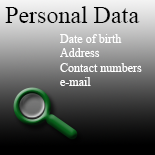
<style>
.page{position:relative;width:155px;height:155px}
.page>*{position:absolute;margin:0}
.t1{font:24px "TimesNewRomanPSMT";color:#000000}
.t2{font:12px "TimesNewRomanPSMT";color:#ffffff}
</style>
<div class="page">
<p class="t1" style="left:5px;top:6px;width:135px;height:17px">Personal Data</p>
<p class="t2" style="left:60px;top:34px;width:82px;height:52px">Date of birth<br>Address<br>Contact numbers<br>e-mail</p>
</div>
